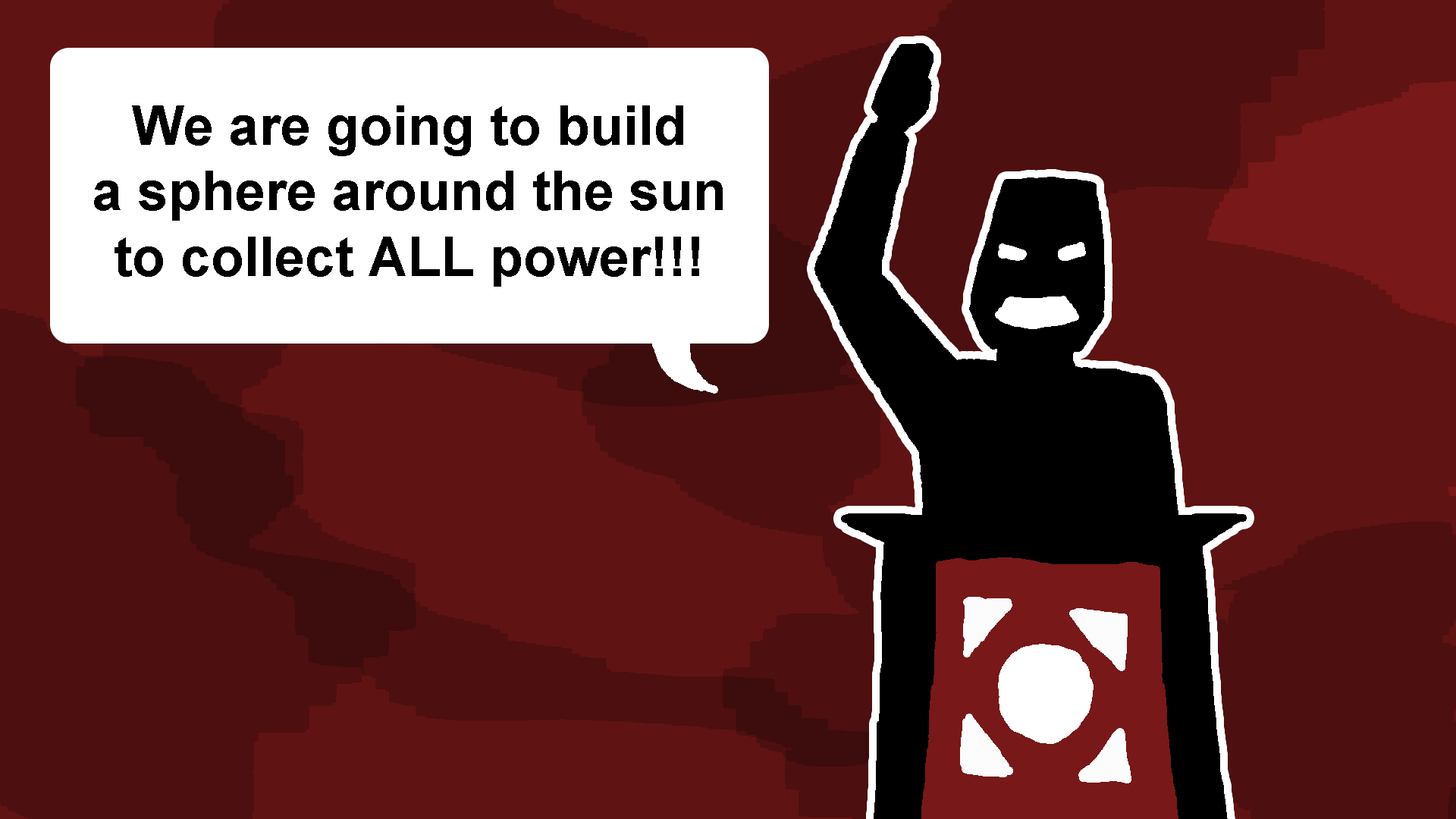
<style>
.page{position:relative;width:1456px;height:819px;background:#4d0f0f}
.page>*{position:absolute;margin:0}
.t1{font:54.6px "Arial-BoldMT";color:#000000}
</style>
<div class="page">
<p class="t1" style="left:94px;top:105px;width:629px;height:182px;text-align:center">We are going to build<br>a sphere around the sun<br>to collect ALL power!!!</p>
</div>
